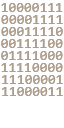
<style>
.page{position:relative;width:64px;height:128px;background:#ffffff}
.page>*{position:absolute;margin:0}
.t1{font:14.2px "Consolas";color:#ad9d8d}
</style>
<div class="page">
<p class="t1" style="left:1px;top:3px;width:62px;height:9px">10000111</p>
<p class="t1" style="left:1px;top:15px;width:62px;height:9px">00001111</p>
<p class="t1" style="left:1px;top:27px;width:62px;height:9px">00011110</p>
<p class="t1" style="left:1px;top:39px;width:62px;height:9px">00111100</p>
<p class="t1" style="left:1px;top:51px;width:62px;height:9px">01111000</p>
<p class="t1" style="left:1px;top:63px;width:62px;height:9px">11110000</p>
<p class="t1" style="left:2px;top:75px;width:61px;height:9px">11100001</p>
<p class="t1" style="left:2px;top:87px;width:61px;height:9px">11000011</p>
</div>
